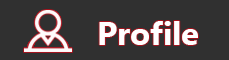
<style>
.page{position:relative;width:229px;height:60px;background:#303030}
.page>*{position:absolute;margin:0}
.t1{font:32px "Gadugi-Bold";color:#ffffff}
</style>
<div class="page">
<p class="t1" style="left:99px;top:21px;width:99px;height:24px">Profile</p>
</div>
